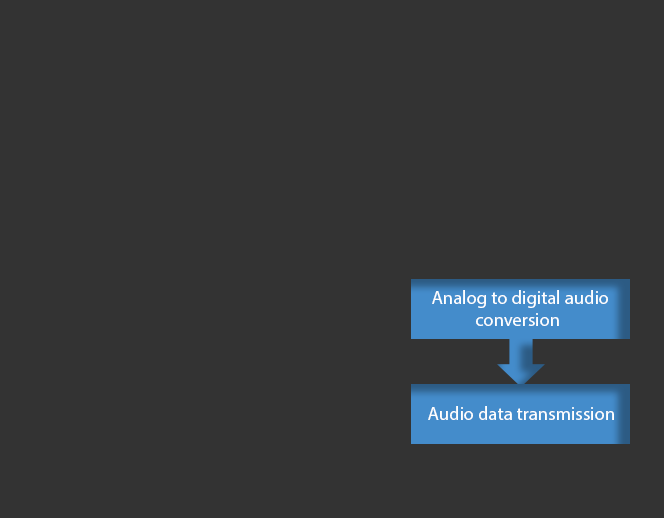
<style>
.page{position:relative;width:664px;height:518px;background:#333333}
.page>*{position:absolute;margin:0}
.t1{font:18.7px "MyriadPro-Regular";color:#ffffff}
</style>
<div class="page">
<p class="t1" style="left:432px;top:290px;width:176px;height:36px">Analog to digital audio <br>           conversion</p>
<p class="t1" style="left:428px;top:406px;width:186px;height:14px">Audio data transmission</p>
</div>
